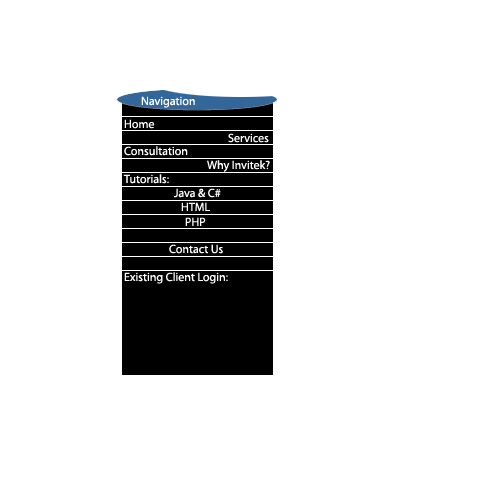
<style>
.page{position:relative;width:504px;height:504px;background:#ffffff}
.page>*{position:absolute;margin:0}
.t1{font:12px "Myriad-Roman";color:#ffffff}
</style>
<div class="page">
<p class="t1" style="left:141px;top:96px;width:54px;height:12px">Navigation</p>
<p class="t1" style="left:124px;top:119px;width:31px;height:10px">Home</p>
<p class="t1" style="left:228px;top:133px;width:41px;height:10px">Services</p>
<p class="t1" style="left:124px;top:146px;width:64px;height:10px">Consultation</p>
<p class="t1" style="left:207px;top:160px;width:63px;height:12px">Why Invitek?</p>
<p class="t1" style="left:123px;top:174px;width:46px;height:10px">Tutorials:</p>
<p class="t1" style="left:174px;top:188px;width:47px;height:10px">Java &amp; C#</p>
<p class="t1" style="left:181px;top:202px;width:29px;height:9px">HTML</p>
<p class="t1" style="left:185px;top:217px;width:21px;height:9px">PHP</p>
<p class="t1" style="left:169px;top:244px;width:54px;height:10px">Contact Us</p>
<p class="t1" style="left:124px;top:272px;width:104px;height:12px">Existing Client Login:</p>
</div>
